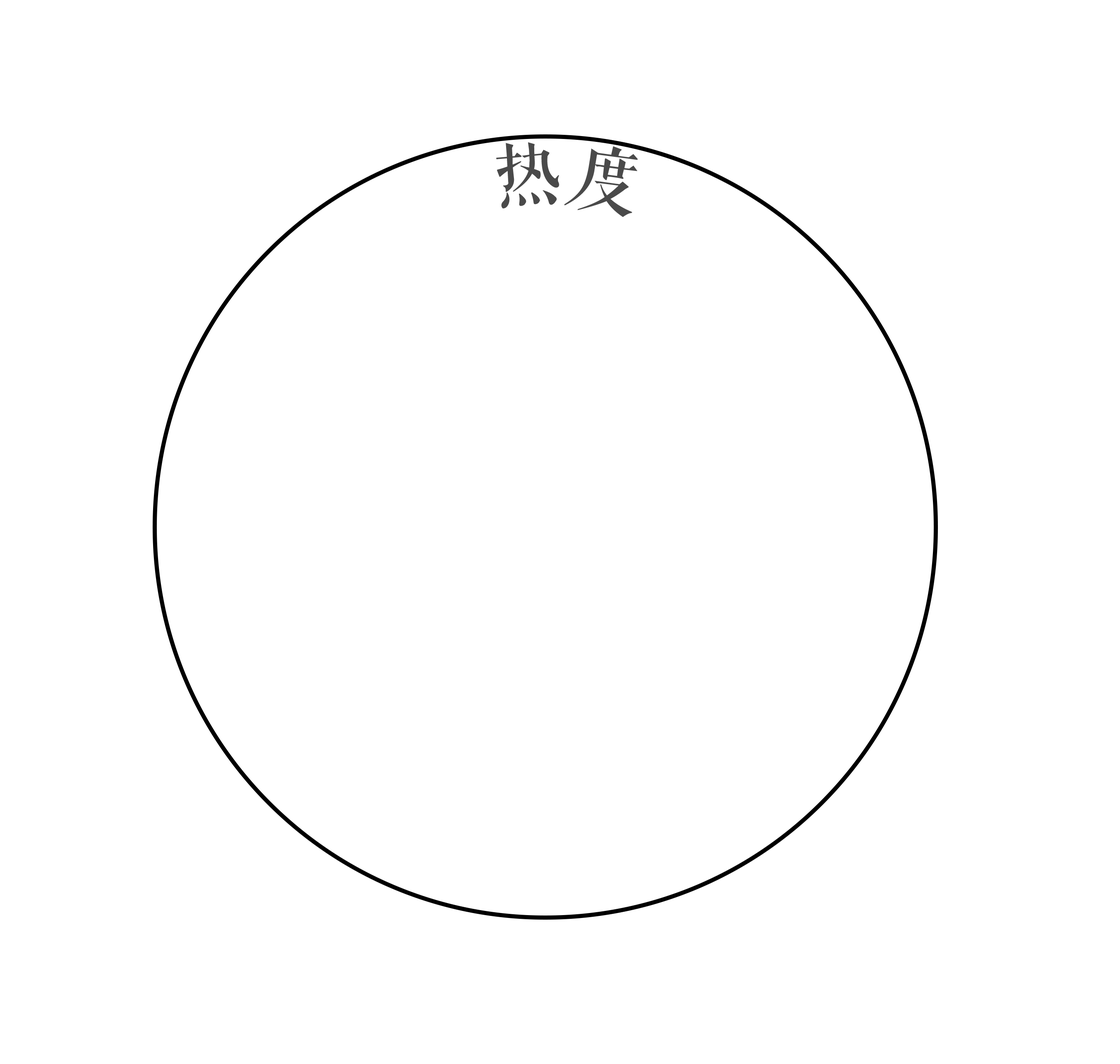
<style>
.page{position:relative;width:1120px;height:1064px;background:#ffffff}
.page>*{position:absolute;margin:0}
.t1{font:71.2px "FZQKBYSJW--GB1-0";color:#4a4a4a}
</style>
<div class="page">
<p class="t1" style="left:496px;top:142px;width:142px;height:75px">热度</p>
</div>
